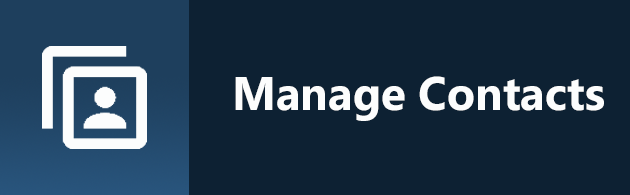
<style>
.page{position:relative;width:630px;height:195px;background:#0d2133}
.page>*{position:absolute;margin:0}
.t1{font:47px "Ebrima-Bold";color:#fcfdfd}
</style>
<div class="page">
<p class="t1" style="left:235px;top:76px;width:369px;height:45px">Manage Contacts</p>
</div>
